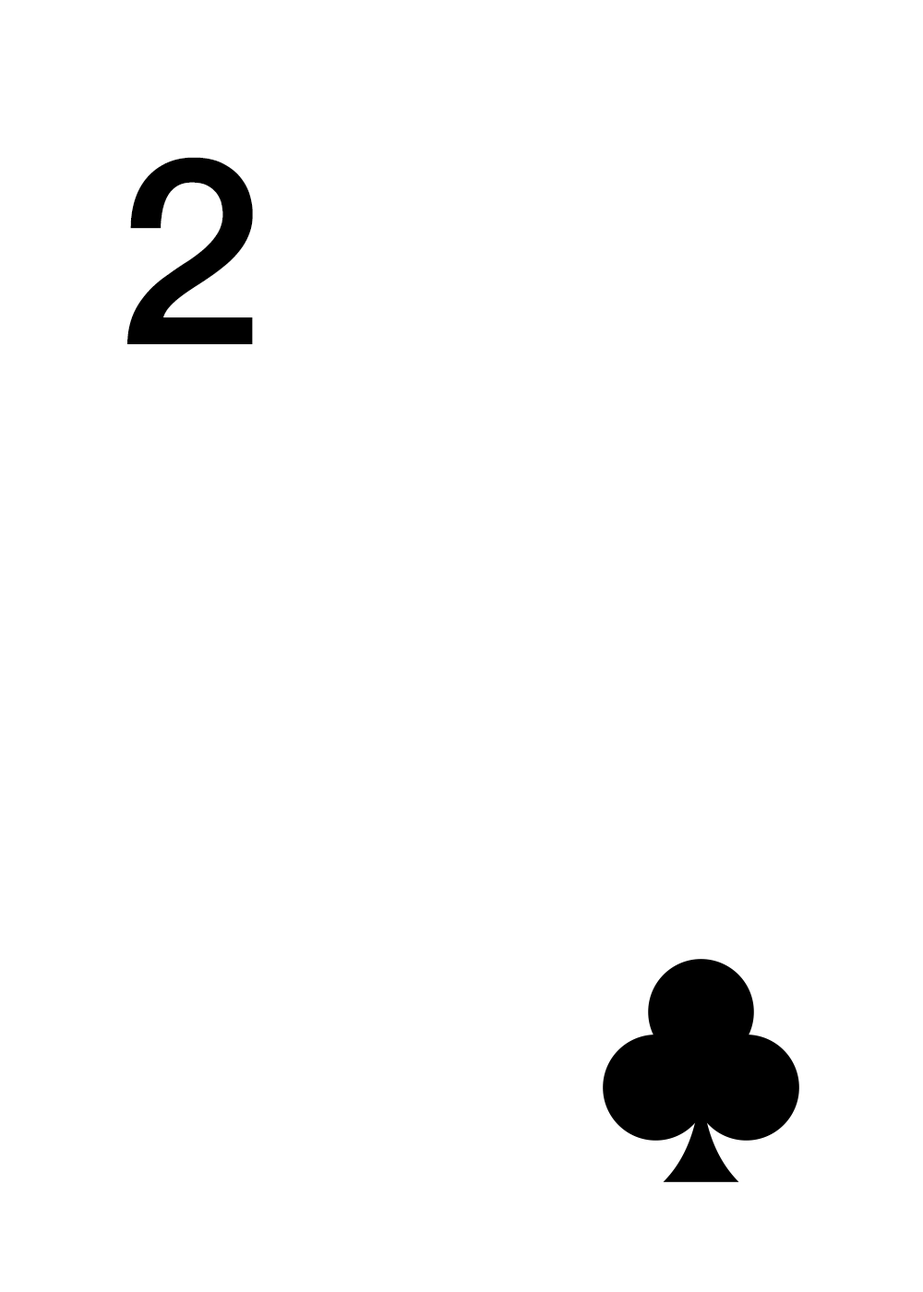
<style>
.page{position:relative;width:923px;height:1292px;background:#ffffff}
.page>*{position:absolute;margin:0}
.t1{font:261.4px "HelveticaNeue-Medium";letter-spacing:-0.1em;color:#000000}
</style>
<div class="page">
<p class="t1" style="left:127px;top:157px;width:126px;height:187px">2</p>
</div>
